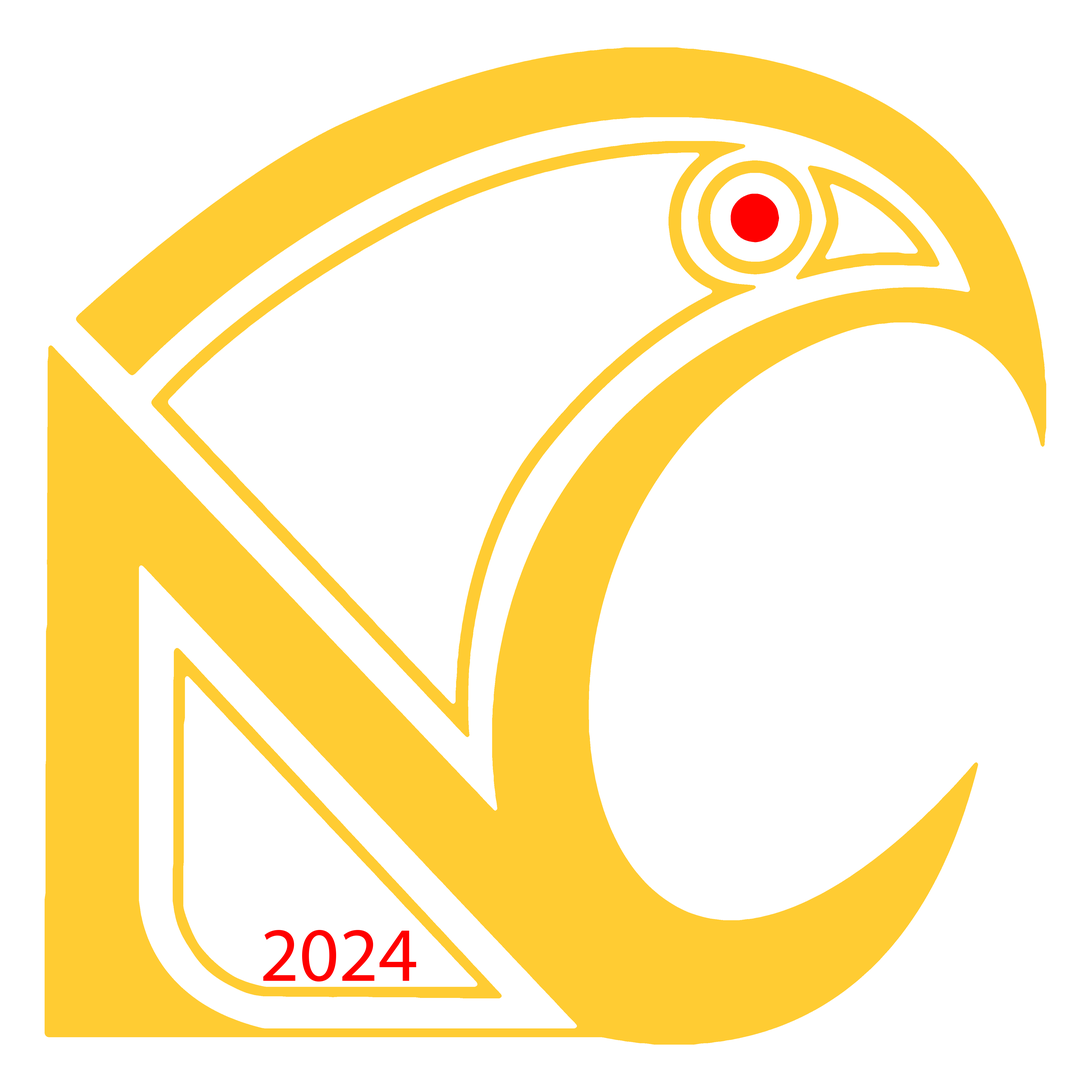
<style>
.page{position:relative;width:1092px;height:1092px;background:#ffffff}
.page>*{position:absolute;margin:0}
.t1{font:77.1px "MyriadPro-Regular";color:#ff0000}
</style>
<div class="page">
<p class="t1" style="left:263px;top:930px;width:153px;height:52px">2024</p>
</div>
